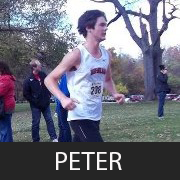
<style>
.page{position:relative;width:180px;height:180px;background:#252525}
.page>*{position:absolute;margin:0}
.t1{font:26.7px "MyriadPro-Regular";color:#faf7f7}
</style>
<div class="page">
<p class="t1" style="left:56px;top:152px;width:66px;height:18px">PETER</p>
</div>
